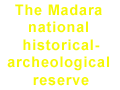
<style>
.page{position:relative;width:120px;height:90px;background:#ffffff}
.page>*{position:absolute;margin:0}
.t1{font:14.6px "Arial-BoldMT";letter-spacing:0.05em;color:#f5f806}
</style>
<div class="page">
<p class="t1" style="left:7px;top:4px;width:102px;height:82px;text-align:center">The Madara <br>national <br>historical-<br>archeological <br>reserve</p>
</div>
